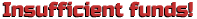
<style>
.page{position:relative;width:197px;height:19px;background:#ffffff}
.page>*{position:absolute;margin:0}
.t1{font:20px "RussoOne-Regular"}
.t2{font:20px "RussoOne-Regular";color:#c22e2e}
</style>
<div class="page">
<p class="t1" style="left:2px;top:2px;width:190px;height:16px">Insufficient funds!</p>
<p class="t2" style="left:3px;top:1px;width:190px;height:16px">Insufficient funds!</p>
</div>
